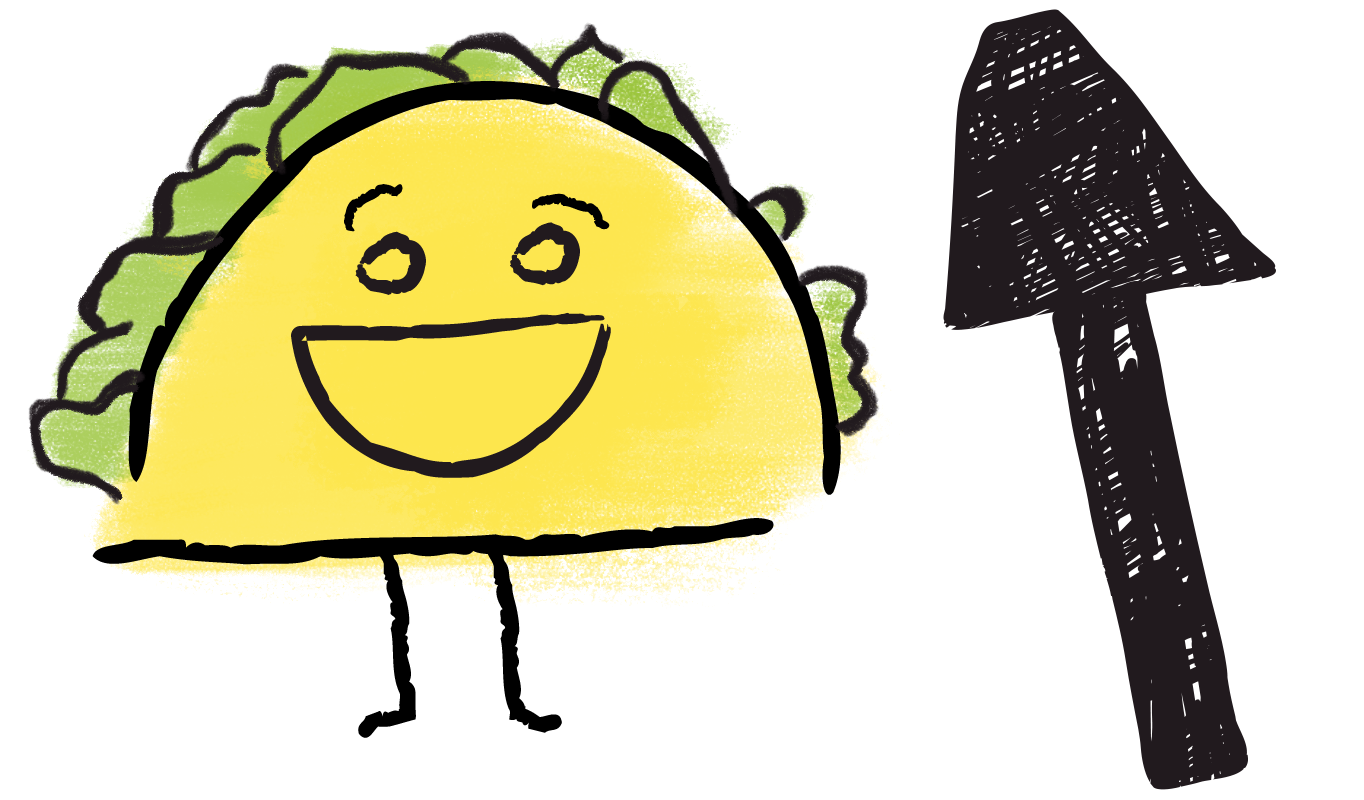
<style>
.page{position:relative;width:1364px;height:800px;background:#ffffff}
.page>*{position:absolute;margin:0}
.t1{font:424.5px "Chalkboard52-2-Regular";letter-spacing:-0.005em;color:#211a1e;scale:2.09 1}
.t2{font:692.6px "Chalkboard52-2-Regular";letter-spacing:-0.005em;color:#211a1e;scale:1.26 1}
</style>
<div class="page">
<p class="t1" style="left:943px;top:9px;width:333px;height:321px;rotate:172deg">V</p>
<p class="t2" style="left:1052px;top:281px;width:196px;height:509px;rotate:162deg">I</p>
</div>
